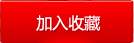
<style>
.page{position:relative;width:134px;height:43px}
.page>*{position:absolute;margin:0}
.t1{font:16px "MicrosoftYaHei";color:#ffffff}
</style>
<div class="page">
<p class="t1" style="left:36px;top:15px;width:65px;height:16px">加入收藏</p>
</div>
